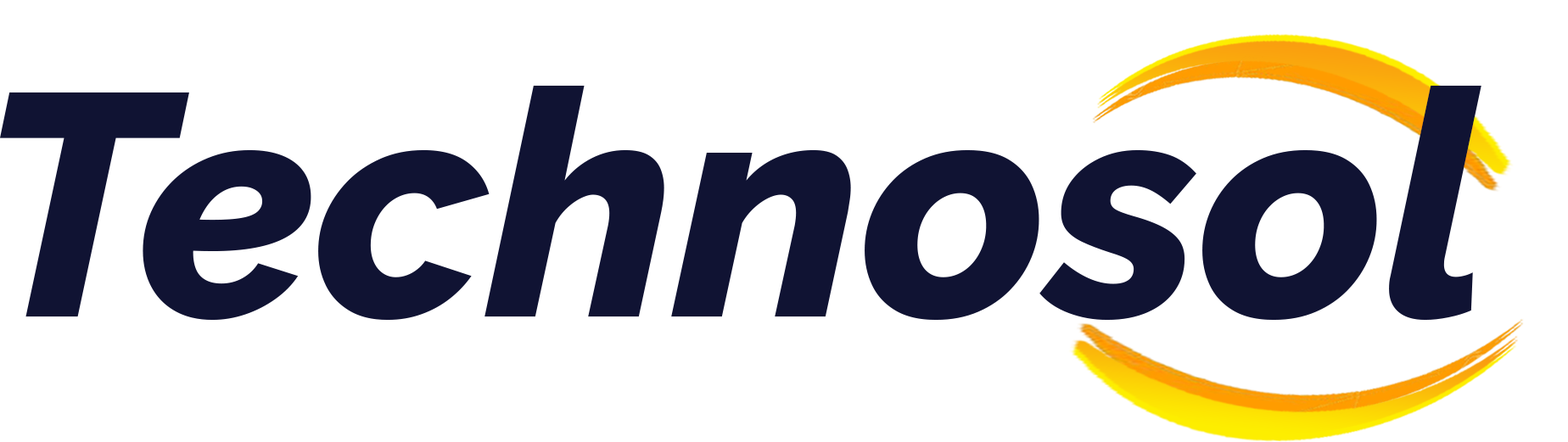
<style>
.page{position:relative;width:1568px;height:442px;background:#ffffff}
.page>*{position:absolute;margin:0}
.t1{font:315.6px "Raleway-ExtraBoldItalic";color:#101333}
</style>
<div class="page">
<p class="t1" style="left:0px;top:86px;width:1481px;height:234px">Technosol</p>
</div>
